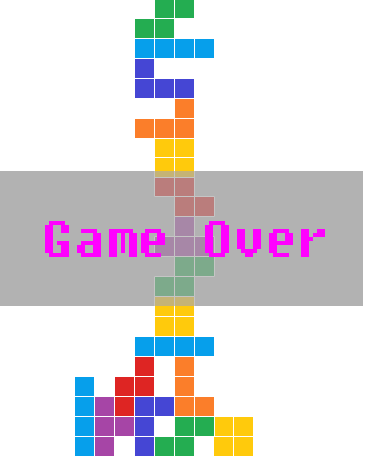
<style>
.page{position:relative;width:365px;height:466px;background:#ffffff}
.page>*{position:absolute;margin:0}
.t1{font:64px "DungGeunMo";color:#ff00ff}
</style>
<div class="page">
<p class="t1" style="left:45px;top:221px;width:280px;height:36px">Game Over</p>
<p class="t1" style="left:45px;top:221px;width:280px;height:36px">Game Over</p>
</div>
